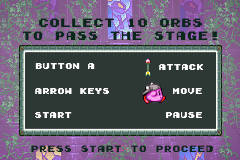
<style>
.page{position:relative;width:240px;height:160px;background:#2d3834}
.page>*{position:absolute;margin:0}
.t1{font:11px "GamegirlClassic";color:#0a271c}
.t2{font:7.5px "GamegirlClassic";color:#ffffff}
.t3{font:8.3px "GamegirlClassic";color:#0a271c}
</style>
<div class="page">
<p class="t1" style="left:22px;top:18px;width:195px;height:22px;text-align:center">COLLECT 10 ORBS<br>TO PASS THE STAGE!</p>
<p class="t2" style="left:35px;top:63px;width:60px;height:6px">BUTTON A</p>
<p class="t2" style="left:159px;top:64px;width:44px;height:6px">ATTACK</p>
<p class="t2" style="left:35px;top:88px;width:74px;height:6px">ARROW KEYS</p>
<p class="t2" style="left:173px;top:88px;width:29px;height:6px">MOVE</p>
<p class="t2" style="left:35px;top:112px;width:37px;height:6px">START</p>
<p class="t2" style="left:166px;top:112px;width:36px;height:6px">PAUSE</p>
<p class="t3" style="left:31px;top:145px;width:182px;height:7px">PRESS START TO PROCEED</p>
</div>
